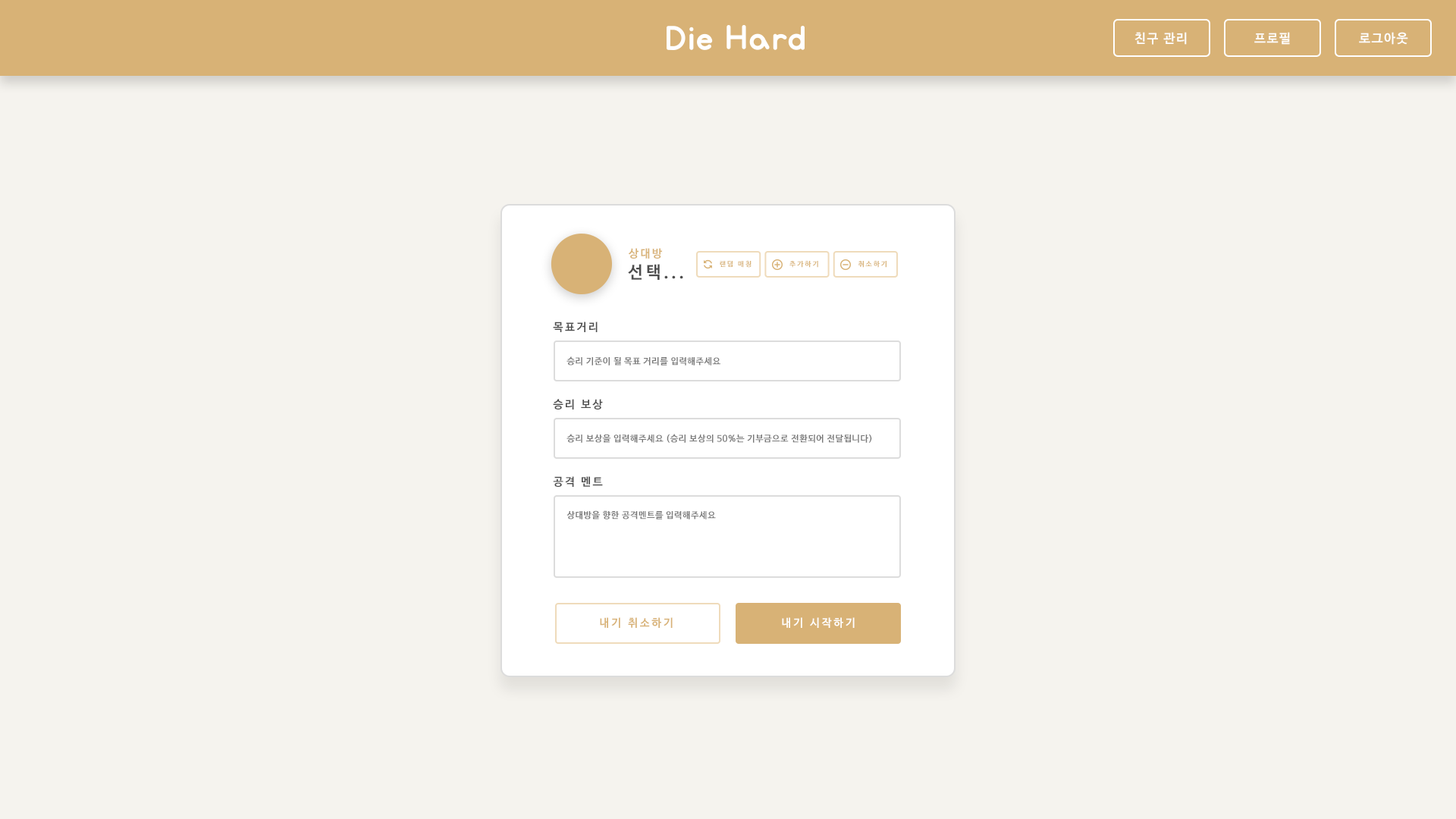
<style>
.page{position:relative;width:1456px;height:819px;background:#f5f3ee}
.page>*{position:absolute;margin:0}
.t1{font:12.6px "NanumBarunGothicBold";letter-spacing:0.1em;color:#fefefe}
.t2{font:12.6px "NanumBarunGothicBold";letter-spacing:0.1em;color:#ffffff}
.t3{font:11.1px "NanumBarunGothicBold";letter-spacing:0.16em;color:#d8b276}
.t4{font:17px "NanumBarunGothicBold";letter-spacing:0.16em;color:#4d4d4d}
.t5{font:7.1px "NanumBarunGothicBold";letter-spacing:0.2em;color:#d8b276}
.t6{font:11.1px "NanumBarunGothicBold";letter-spacing:0.16em;color:#4d4d4d}
.t7{font:8.8px "NanumBarunGothicBold";letter-spacing:0.05em;color:#787878}
.t8{font:11px "NanumBarunGothicBold";letter-spacing:0.2em;color:#d8b276}
.t9{font:11px "NanumBarunGothicBold";letter-spacing:0.2em;color:#ffffff}
</style>
<div class="page">
<p class="t1" style="left:1134px;top:32px;width:53px;height:13px">친구 관리</p>
<p class="t2" style="left:1254px;top:32px;width:36px;height:13px">프로필</p>
<p class="t1" style="left:1359px;top:32px;width:49px;height:13px">로그아웃</p>
<p class="t3" style="left:628px;top:248px;width:34px;height:11px">상대방</p>
<p class="t4" style="left:628px;top:264px;width:55px;height:16px">선택...</p>
<p class="t5" style="left:720px;top:260px;width:31px;height:8px">랜덤 매칭</p>
<p class="t5" style="left:789px;top:261px;width:29px;height:7px">추가하기</p>
<p class="t5" style="left:858px;top:261px;width:28px;height:7px">취소하기</p>
<p class="t6" style="left:553px;top:322px;width:45px;height:10px">목표거리</p>
<p class="t7" style="left:566px;top:356px;width:154px;height:10px">승리 기준이 될 목표 거리를 입력해주세요</p>
<p class="t6" style="left:553px;top:399px;width:50px;height:10px">승리 보상</p>
<p class="t7" style="left:566px;top:434px;width:306px;height:9px">승리 보상을 입력해주세요 (승리 보상의 50%는 기부금으로 전환되어 전달됩니다)</p>
<p class="t6" style="left:553px;top:476px;width:50px;height:11px">공격 멘트</p>
<p class="t7" style="left:566px;top:510px;width:150px;height:9px">상대방을 향한 공격멘트를 입력해주세요</p>
<p class="t8" style="left:600px;top:617px;width:73px;height:11px">내기 취소하기</p>
<p class="t9" style="left:782px;top:617px;width:73px;height:11px">내기 시작하기</p>
</div>
